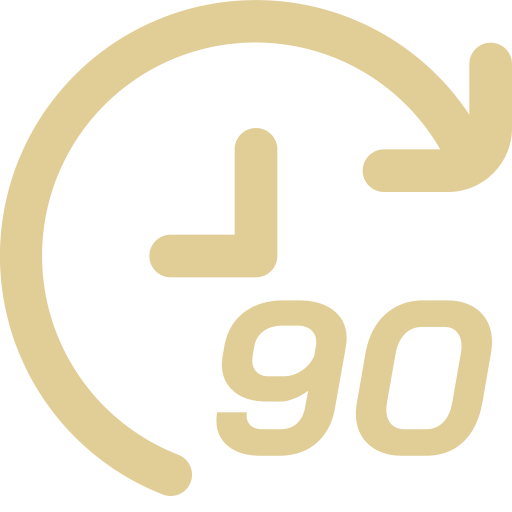
<style>
.page{position:relative;width:512px;height:512px;background:#ffffff}
.page>*{position:absolute;margin:0}
.t1{font:216.9px "BaiJamjuree-BoldItalic";color:#e1cd96}
</style>
<div class="page">
<p class="t1" style="left:216px;top:300px;width:276px;height:156px">90</p>
</div>
